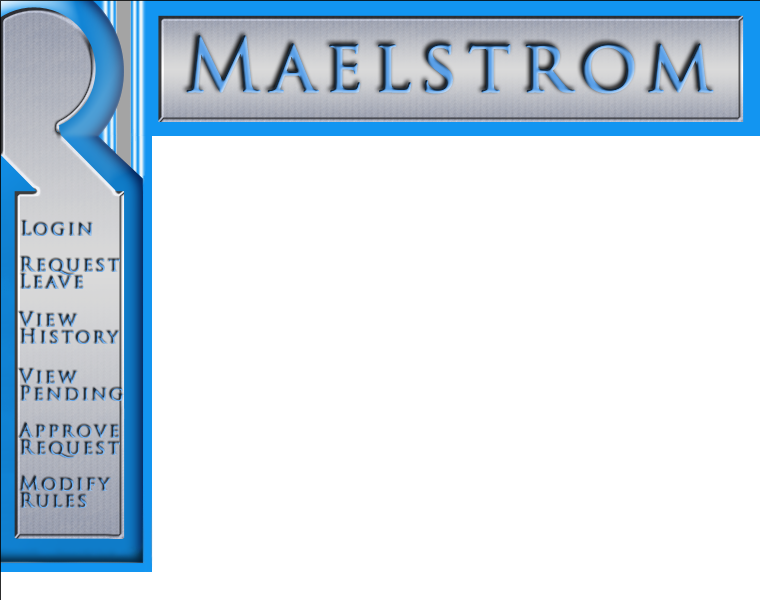
<style>
.page{position:relative;width:760px;height:600px;background:#ffffff}
.page>*{position:absolute;margin:0}
.t1{font:19px "TrajanPro-Regular";letter-spacing:0.1em;font-weight:bold}
.t2{font:19px/17px "TrajanPro-Regular";letter-spacing:0.1em;font-weight:bold}
</style>
<div class="page">
<p class="t1" style="left:22px;top:221px;width:71px;height:15px">Login</p>
<p class="t2" style="left:21px;top:257px;width:99px;height:32px">Request<br>Leave</p>
<p class="t2" style="left:19px;top:312px;width:101px;height:32px">View<br>History</p>
<p class="t2" style="left:19px;top:369px;width:105px;height:32px">View<br>Pending</p>
<p class="t2" style="left:19px;top:423px;width:101px;height:36px">Approve<br>Request</p>
<p class="t1" style="left:20px;top:476px;width:91px;height:32px">Modify Rules</p>
</div>
